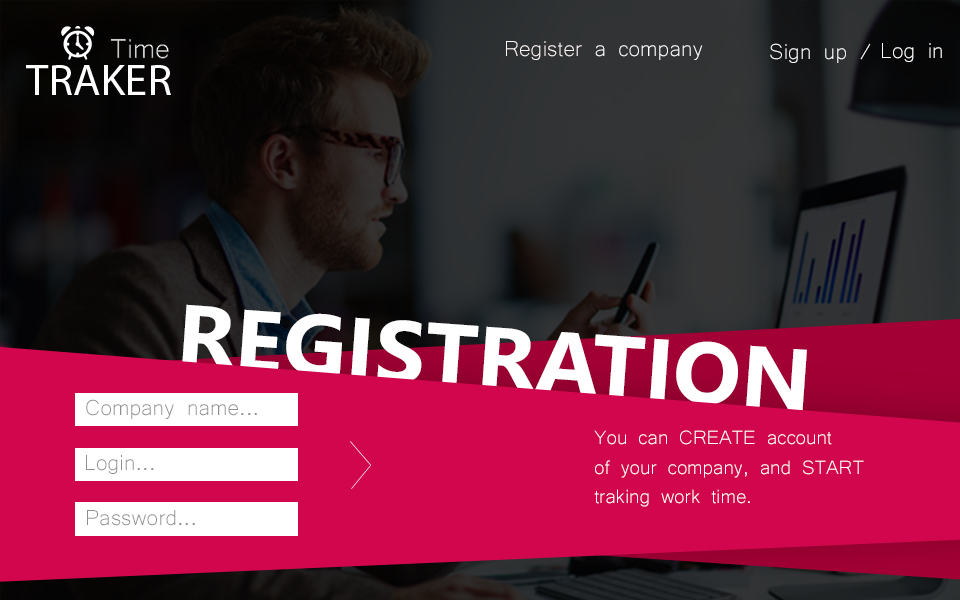
<style>
.page{position:relative;width:960px;height:600px;background:#d2064d}
.page>*{position:absolute;margin:0}
.t1{font:28px "Microsoft-Yi-Baiti";color:#ffffff}
.t2{font:28px "Microsoft-Yi-Baiti";color:#fff6f6}
.t3{font:87px "SegoeUI-Bold";color:#ffffff;scale:1.03 1}
.t4{font:28px "Microsoft-Yi-Baiti";color:#918d8d}
.t5{font:24.9px "Microsoft-Yi-Baiti";color:#ffffff}
</style>
<div class="page">
<p class="t1" style="left:506px;top:41px;width:197px;height:19px"><span class="t2">Register </span>a company</p>
<p class="t1" style="left:770px;top:43px;width:101px;height:20px">Sign up /</p>
<p class="t1" style="left:882px;top:43px;width:60px;height:19px">Log in</p>
<p class="t3" style="left:182px;top:304px;width:625px;height:107px;rotate:4deg">REGISTRATION</p>
<p class="t4" style="left:86px;top:399px;width:171px;height:20px">Company name...</p>
<p class="t5" style="left:594px;top:430px;width:270px;height:77px;text-align:right">You can CREATE account <br>of your company, and START<br>traking work time.</p>
<p class="t4" style="left:86px;top:455px;width:68px;height:19px">Login...</p>
<p class="t4" style="left:87px;top:510px;width:108px;height:16px">Password...</p>
</div>
